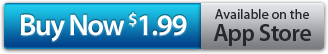
<style>
.page{position:relative;width:328px;height:54px}
.page>*{position:absolute;margin:0}
.t1{font:30px "MyriadPro-Semibold";letter-spacing:-0.05em;color:#ffffff}
.t2{font:14px "MyriadPro-Regular";color:#25282d}
.t3{font:24px "MyriadPro-Semibold";letter-spacing:-0.025em;color:#25282d}
</style>
<div class="page">
<p class="t1" style="left:21px;top:12px;width:166px;height:30px">Buy Now $1.99</p>
<p class="t2" style="left:215px;top:9px;width:94px;height:10px">Available on the</p>
<p class="t3" style="left:213px;top:24px;width:98px;height:22px">App Store</p>
</div>
